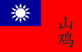
<style>
.page{position:relative;width:82px;height:52px;background:#fe0000}
.page>*{position:absolute;margin:0}
.t1{font:17.9px/16.3px "AdobeKaitiStd-Regular";color:#282828;font-weight:bold;scale:1.05 1}
</style>
<div class="page">
<p class="t1" style="left:57px;top:16px;width:17px;height:32px">山<br>鸡</p>
</div>
